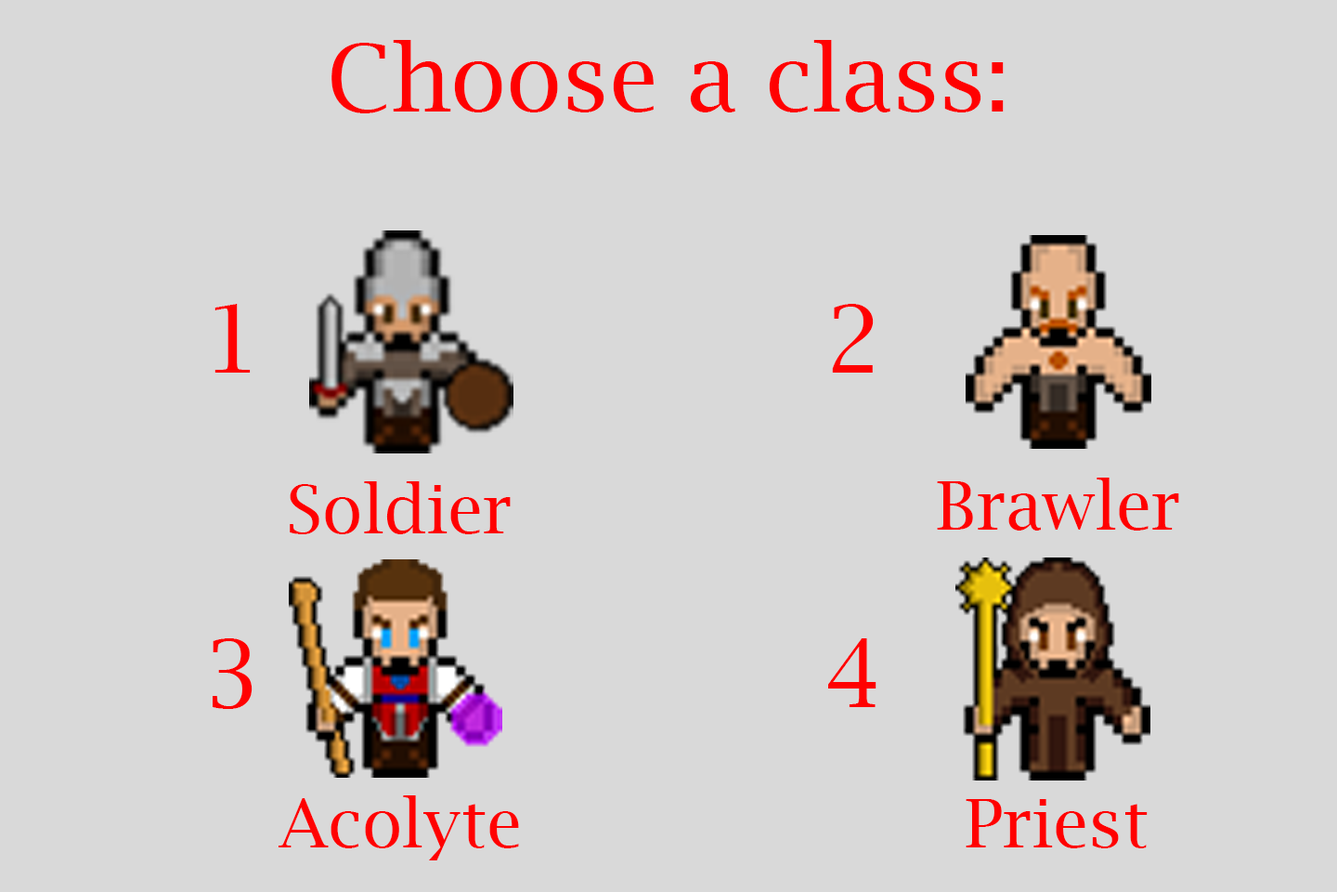
<style>
.page{position:relative;width:1337px;height:892px;background:#d9d9d9}
.page>*{position:absolute;margin:0}
.t1{font:92.9px "LucidaBright";color:#ff0101}
.t2{font:66.9px "LucidaBright";color:#ff0101}
</style>
<div class="page">
<p class="t1" style="left:332px;top:40px;width:672px;height:73px">Choose a class:</p>
<p class="t2" style="left:290px;top:481px;width:221px;height:53px">Soldier</p>
<p class="t2" style="left:937px;top:477px;width:243px;height:53px">Brawler</p>
<p class="t2" style="left:279px;top:795px;width:240px;height:65px">Acolyte</p>
<p class="t2" style="left:966px;top:799px;width:182px;height:49px">Priest</p>
</div>
